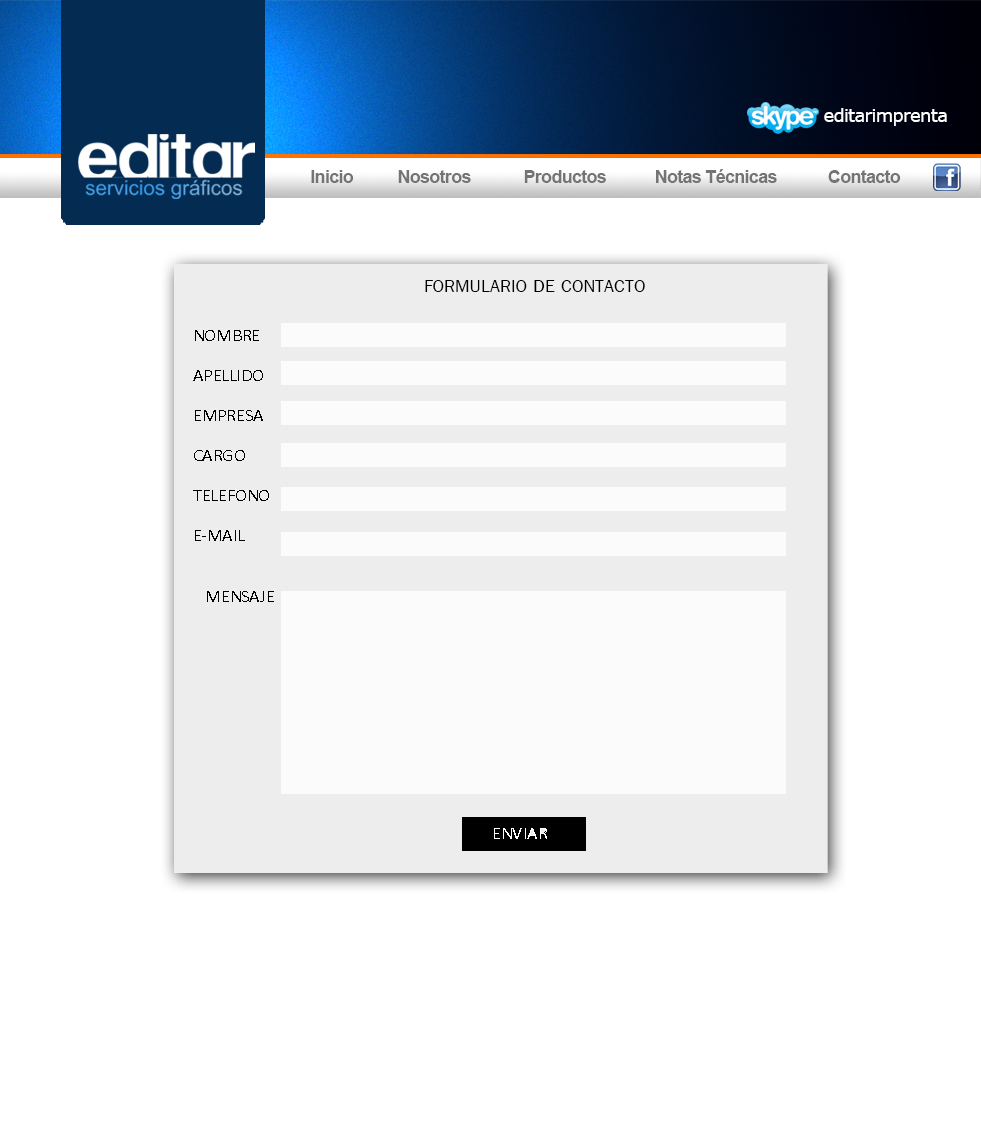
<style>
.page{position:relative;width:981px;height:1132px;background:#ffffff}
.page>*{position:absolute;margin:0}
.t1{font:18px "Verdana";letter-spacing:-0.04em;color:#ffffff}
.t2{font:18px "Arial-BoldMT";letter-spacing:-0.04em;color:#747474}
.t3{font:26.7px "FreesiaUPC";color:#000000}
.t4{font:18px/40px "Calibri";color:#000000}
.t5{font:18px "Calibri";color:#000000}
</style>
<div class="page">
<p class="t1" style="left:824px;top:108px;width:123px;height:18px">editarimprenta</p>
<p class="t2" style="left:311px;top:170px;width:43px;height:13px">Inicio</p>
<p class="t2" style="left:398px;top:170px;width:73px;height:13px">Nosotros</p>
<p class="t2" style="left:524px;top:170px;width:82px;height:13px">Productos</p>
<p class="t2" style="left:656px;top:169px;width:121px;height:14px">Notas Técnicas</p>
<p class="t2" style="left:828px;top:170px;width:73px;height:13px">Contacto</p>
<p class="t3" style="left:425px;top:280px;width:220px;height:12px">FORMULARIO DE CONTACTO</p>
<p class="t4" style="left:193px;top:330px;width:76px;height:211px;text-align:right">NOMBRE<br>APELLIDO<br>EMPRESA<br>CARGO<br>TELEFONO<br>E-MAIL</p>
<p class="t5" style="left:207px;top:591px;width:67px;height:11px">MENSAJE</p>
</div>
